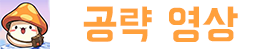
<style>
.page{position:relative;width:264px;height:49px;background:#ffffff}
.page>*{position:absolute;margin:0}
.t1{font:41.7px "BMHANNA11yrsold";color:#ffa03c}
</style>
<div class="page">
<p class="t1" style="left:83px;top:6px;width:155px;height:36px">공략 영상</p>
</div>
